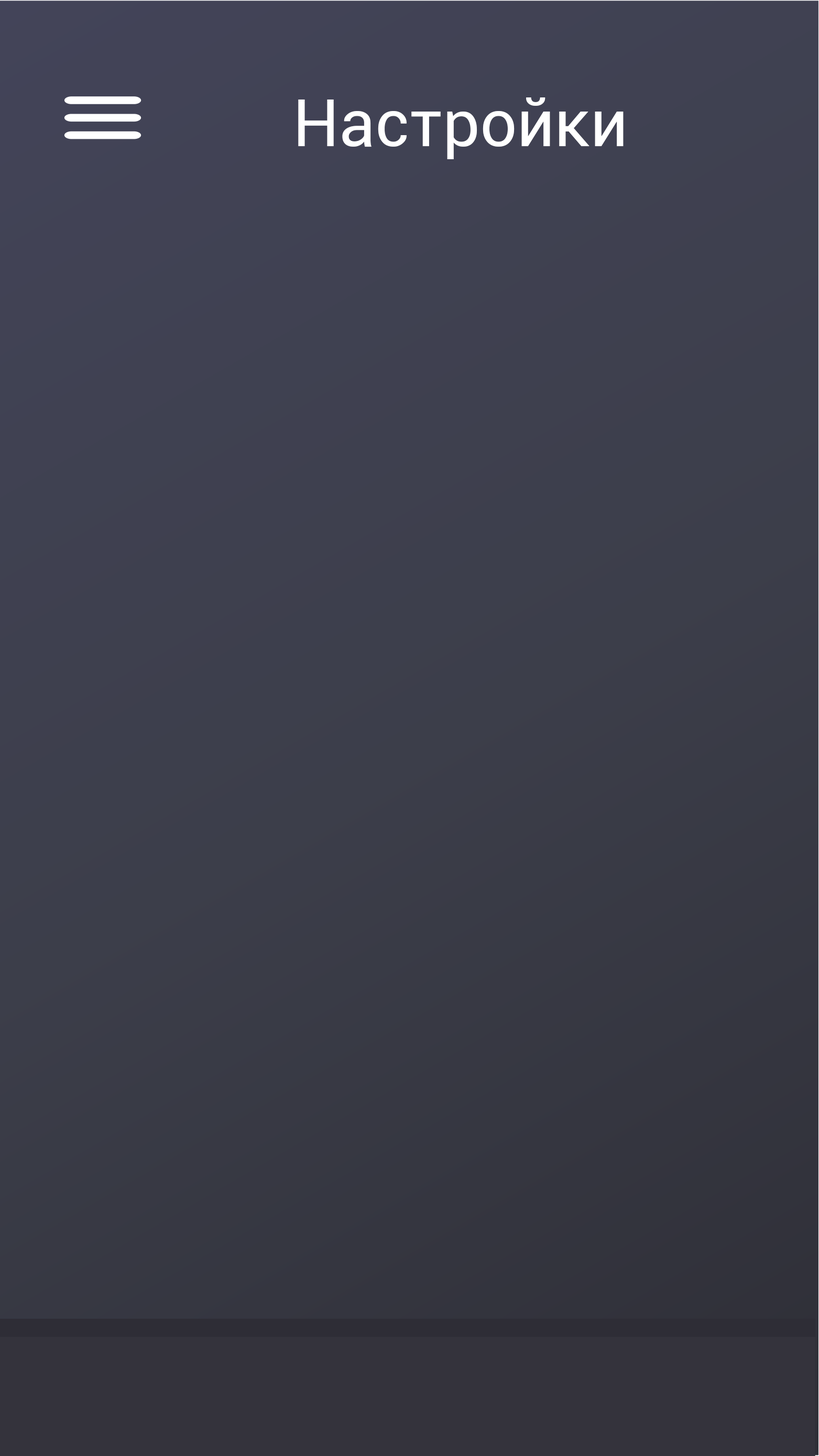
<style>
.page{position:relative;width:819px;height:1456px}
.page>*{position:absolute;margin:0}
.t1{font:65.5px "Roboto-Regular";color:#ffffff}
</style>
<div class="page">
<p class="t1" style="left:298px;top:97px;width:325px;height:62px">Настройки</p>
</div>
